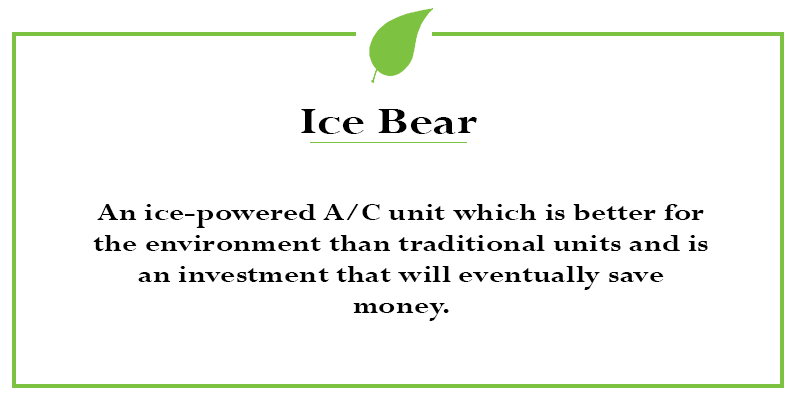
<style>
.page{position:relative;width:800px;height:400px;background:#ffffff}
.page>*{position:absolute;margin:0}
.t1{font:40.8px "Perpetua-Bold";color:#000000;scale:1.26 1}
.t2{font:25.6px "Perpetua-Bold";color:#000000;scale:1.26 1}
</style>
<div class="page">
<p class="t1" style="left:301px;top:109px;width:176px;height:25px">Ice Bear</p>
<p class="t2" style="left:93px;top:204px;width:615px;height:117px;text-align:center">An ice-powered A/C unit which is better for the environment than traditional units and is an investment that will eventually save money.</p>
</div>
